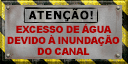
<style>
.page{position:relative;width:128px;height:64px}
.page>*{position:absolute;margin:0}
.t1{font:11px "Tahoma-Bold";letter-spacing:0.08em;color:#000000;font-weight:bold}
.t2{font:10px/11px "Arial-Black";letter-spacing:-0.1em;color:#ac0000;text-transform:uppercase}
</style>
<div class="page">
<p class="t1" style="left:28px;top:8px;width:65px;height:14px">ATENÇÃO!</p>
<p class="t2" style="left:7px;top:24px;width:113px;height:31px;text-align:center">excesso de água<br>devido à inundação<br>do canal</p>
</div>
